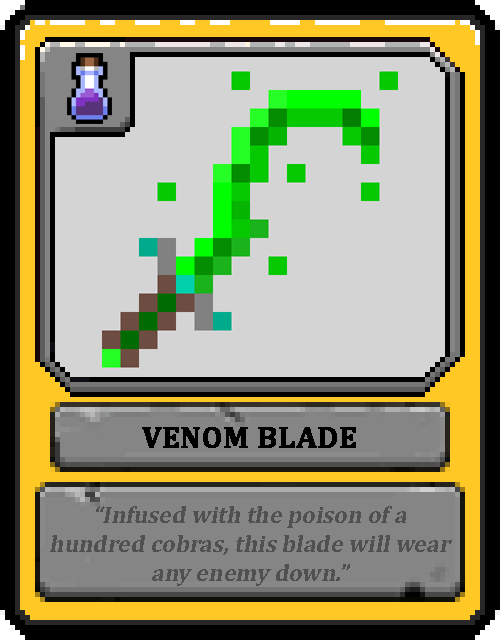
<style>
.page{position:relative;width:500px;height:640px;background:#d4d4d4}
.page>*{position:absolute;margin:0}
.t1{font:30px "Cambria-Bold";color:#000000;text-transform:uppercase;font-weight:bold}
.t2{font:24px "Cambria-Bold";color:#505050;font-style:italic}
</style>
<div class="page">
<p class="t1" style="left:142px;top:427px;width:214px;height:21px">Venom Blade</p>
<p class="t2" style="left:50px;top:506px;width:402px;height:80px;text-align:center">“Infused with the poison of a hundred cobras, this blade will wear any enemy down.”</p>
</div>
